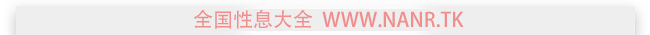
<style>
.page{position:relative;width:650px;height:35px;background:#eeeeee}
.page>*{position:absolute;margin:0}
.t1{font:20px "AdobeHeitiStd-Regular";color:#f08d8d;text-transform:uppercase}
</style>
<div class="page">
<p class="t1" style="left:193px;top:10px;width:271px;height:19px">全国性息大全  www.nanr.tk</p>
</div>
